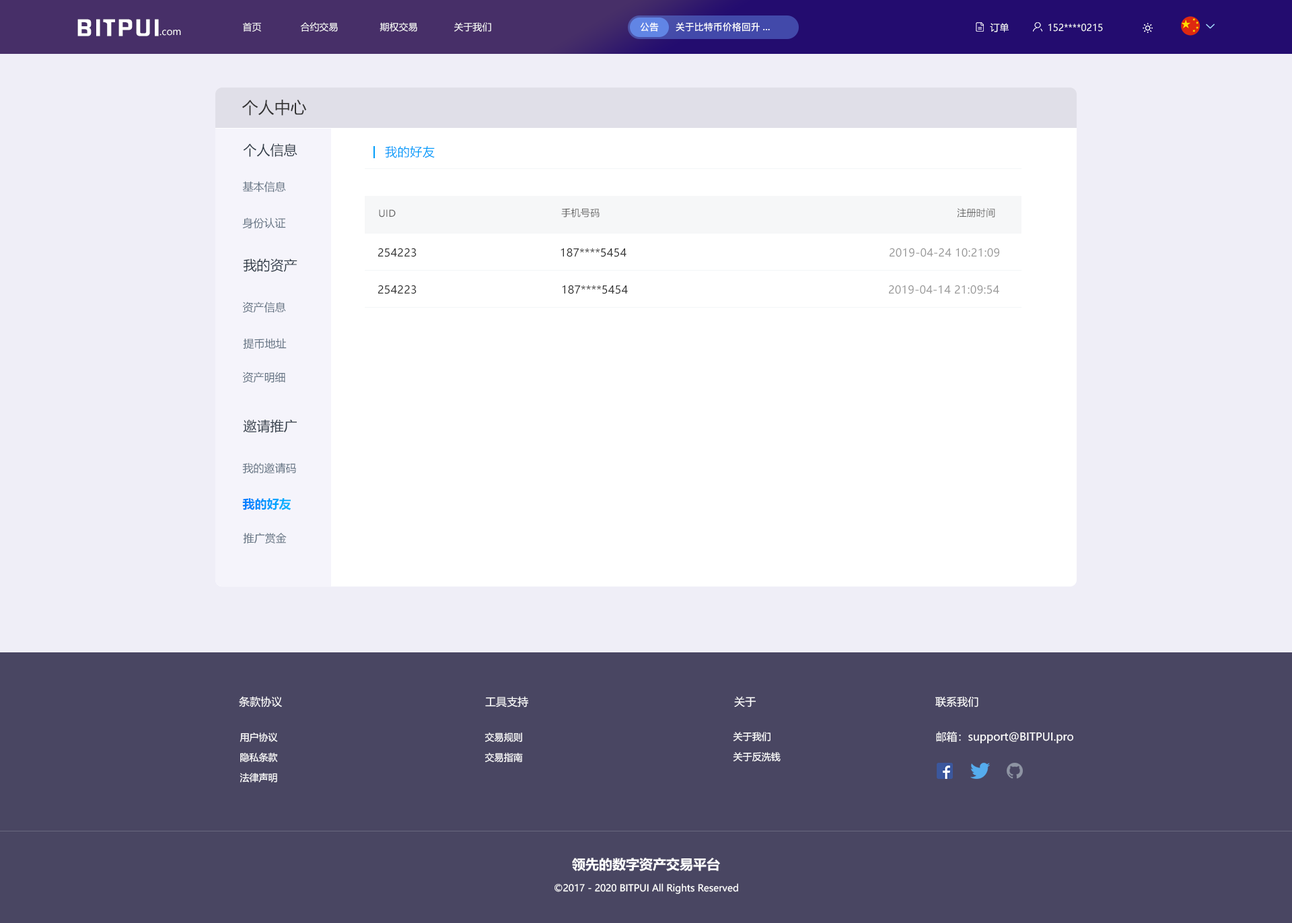
<style>
.page{position:relative;width:1292px;height:923px;background:#efeef7}
.page>*{position:absolute;margin:0}
.t1{font:20.6px "FZHZGBJW--GB1-0";letter-spacing:0.1em;color:#ffffff;scale:1.14 1}
.t2{font:9.4px "MicrosoftYaHei";color:#ffffff}
.t3{font:9.4px "PingFang-SC-Bold";color:#ffffff}
.t4{font:16.2px "MicrosoftYaHei";color:#333333}
.t5{font:13.5px "MicrosoftYaHei";color:#303b47}
.t6{font:12.1px "MicrosoftYaHei";letter-spacing:0.03em;color:#009dfa}
.t7{font:10.8px "MicrosoftYaHei";color:#637282}
.t8{font:9.4px "MicrosoftYaHei";letter-spacing:0.025em;color:#666666}
.t9{font:10.8px "MicrosoftYaHei";letter-spacing:0.025em;color:#333333;text-transform:uppercase}
.t10{font:10.8px "MicrosoftYaHei";letter-spacing:0.025em;color:#333333}
.t11{font:10.8px "MicrosoftYaHei";letter-spacing:0.025em;color:#999999;text-transform:uppercase}
.t12{font:12.1px "MicrosoftYaHei-Bold"}
.t13{font:10.8px "MicrosoftYaHei";color:#ffffff}
.t14{font:9.4px/20.2px "MicrosoftYaHei";color:#ffffff}
.t15{font:13.5px "MicrosoftYaHei-Bold";color:#ffffff}
</style>
<div class="page">
<p class="t1" style="left:77px;top:19px;width:82px;height:17px">BITPUI</p>
<p class="t2" style="left:160px;top:30px;width:21px;height:6px">.com</p>
<p class="t2" style="left:243px;top:22px;width:248px;height:10px">首页              合约交易               期权交易             关于我们</p>
<p class="t3" style="left:640px;top:22px;width:19px;height:10px">公告</p>
<p class="t3" style="left:676px;top:22px;width:94px;height:10px">关于比特币价格回升...</p>
<p class="t2" style="left:990px;top:23px;width:19px;height:9px">订单</p>
<p class="t2" style="left:1049px;top:24px;width:54px;height:8px">152****0215</p>
<p class="t4" style="left:242px;top:100px;width:65px;height:16px">个人中心</p>
<p class="t5" style="left:243px;top:143px;width:54px;height:14px">个人信息</p>
<p class="t6" style="left:385px;top:146px;width:50px;height:12px">我的好友</p>
<p class="t7" style="left:242px;top:181px;width:44px;height:11px">基本信息</p>
<p class="t8" style="left:379px;top:209px;width:17px;height:8px">UID</p>
<p class="t8" style="left:561px;top:208px;width:39px;height:9px">手机号码</p>
<p class="t8" style="left:957px;top:208px;width:38px;height:9px">注册时间</p>
<p class="t7" style="left:242px;top:217px;width:44px;height:12px">身份认证</p>
<p class="t9" style="left:378px;top:248px;width:39px;height:9px">254223</p>
<p class="t10" style="left:561px;top:248px;width:66px;height:9px">187****5454</p>
<p class="t11" style="left:890px;top:248px;width:109px;height:9px">2019-04-24 10:21:09</p>
<p class="t5" style="left:243px;top:258px;width:54px;height:14px">我的资产</p>
<p class="t9" style="left:378px;top:285px;width:39px;height:9px">254223</p>
<p class="t10" style="left:562px;top:285px;width:66px;height:9px">187****5454</p>
<p class="t11" style="left:889px;top:285px;width:110px;height:9px">2019-04-14 21:09:54</p>
<p class="t7" style="left:242px;top:302px;width:44px;height:11px">资产信息</p>
<p class="t7" style="left:243px;top:338px;width:44px;height:11px">提币地址</p>
<p class="t7" style="left:242px;top:372px;width:43px;height:11px">资产明细</p>
<p class="t5" style="left:243px;top:419px;width:54px;height:14px">邀请推广</p>
<p class="t7" style="left:242px;top:462px;width:54px;height:11px">我的邀请码</p>
<p class="t12" style="left:242px;top:498px;width:49px;height:12px">我的好友</p>
<p class="t7" style="left:243px;top:532px;width:44px;height:12px">推广赏金</p>
<p class="t13" style="left:239px;top:696px;width:43px;height:11px">条款协议</p>
<p class="t13" style="left:485px;top:696px;width:43px;height:11px">工具支持</p>
<p class="t13" style="left:734px;top:696px;width:23px;height:11px">关于</p>
<p class="t13" style="left:936px;top:696px;width:43px;height:11px">联系我们</p>
<p class="t14" style="left:240px;top:732px;width:38px;height:50px;text-align:center">用户协议<br>隐私条款<br>法律声明</p>
<p class="t14" style="left:485px;top:732px;width:38px;height:30px">交易规则<br>交易指南</p>
<p class="t14" style="left:733px;top:732px;width:48px;height:29px">关于我们<br>关于反洗钱</p>
<p class="t13" style="left:936px;top:731px;width:138px;height:13px">邮箱：support@BITPUI.pro</p>
<p class="t15" style="left:572px;top:857px;width:148px;height:14px">领先的数字资产交易平台</p>
<p class="t2" style="left:555px;top:883px;width:183px;height:11px">©2017 - 2020 BITPUI All Rights Reserved</p>
</div>
